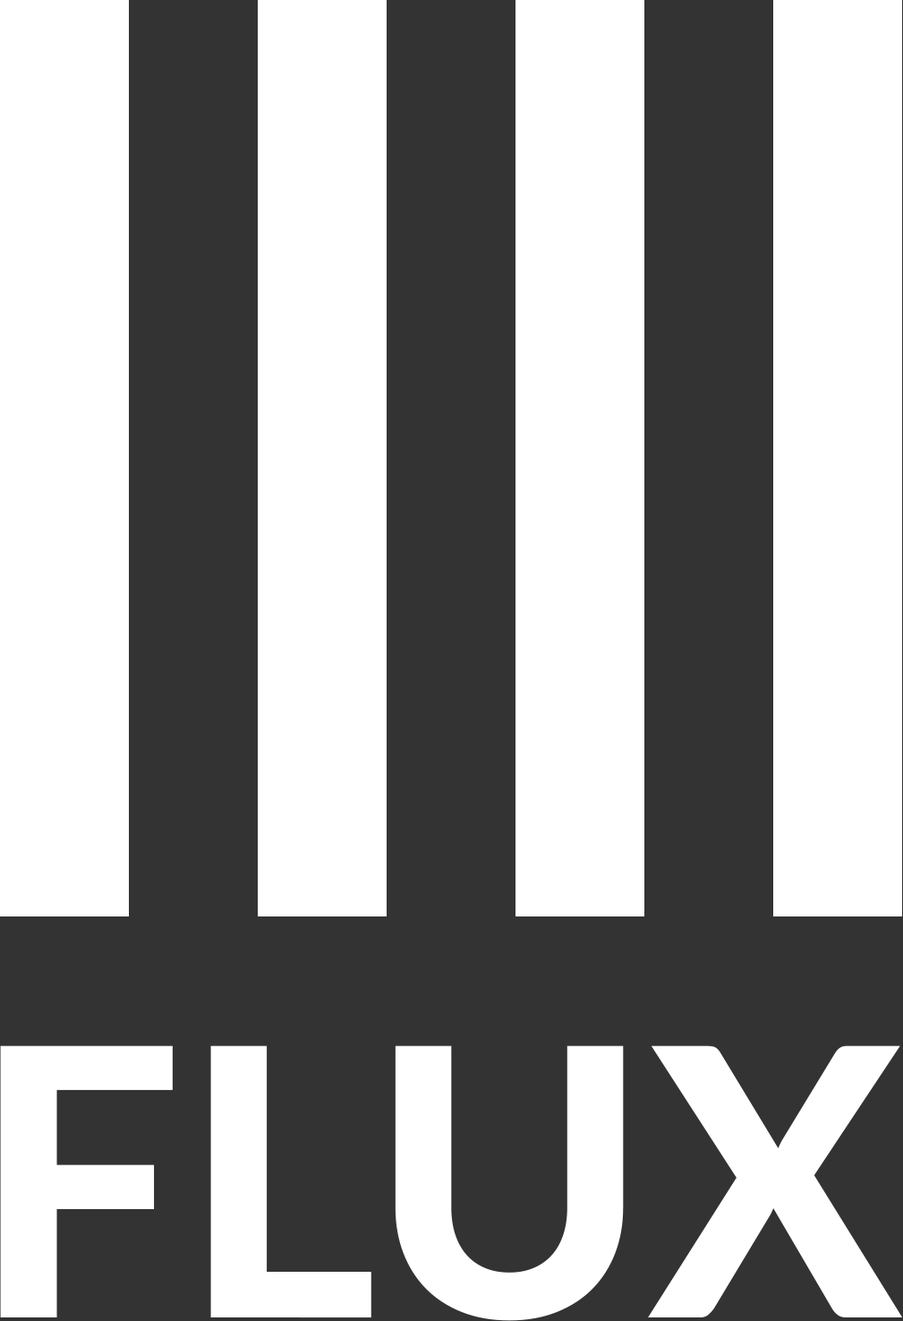
<style>
.page{position:relative;width:903px;height:1321px;background:#333333}
.page>*{position:absolute;margin:0}
.t1{font:374.1px "Lato-Heavy";color:#ffffff}
</style>
<div class="page">
<p class="t1" style="left:0px;top:1045px;width:903px;height:276px">FLUX</p>
</div>
